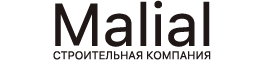
<style>
.page{position:relative;width:258px;height:61px;background:#ffffff}
.page>*{position:absolute;margin:0}
.t1{font:11px "SFUIText-RegularG1";color:#201717}
.t2{font:60px "SFUIText-RegularG2";color:#201717}
</style>
<div class="page">
<p class="t1" style="left:53px;top:0px;width:158px;height:60px;text-align:center"><span class="t2">Malial<br></span>СТРОИТЕЛЬНАЯ КОМПАНИЯ</p>
</div>
